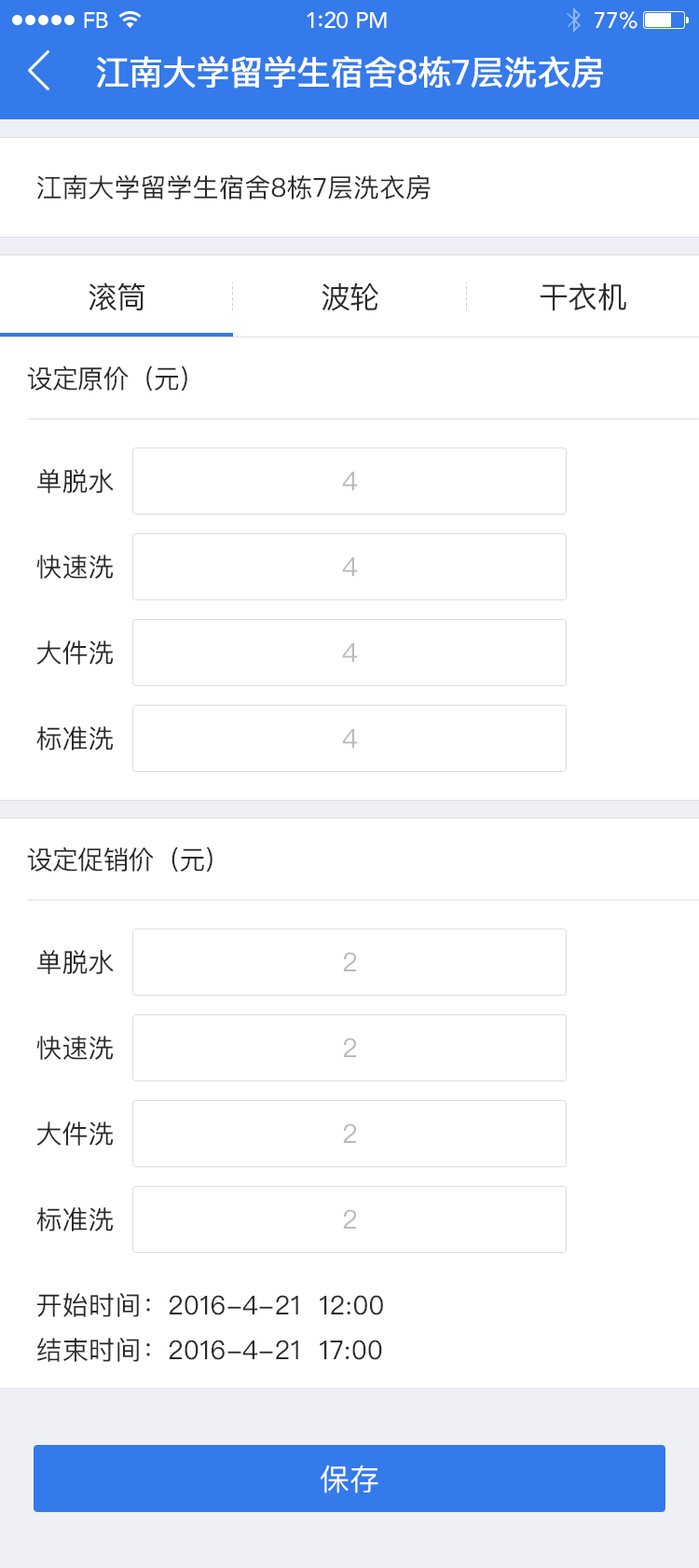
<style>
.page{position:relative;width:699px;height:1568px;background:#ffffff}
.page>*{position:absolute;margin:0}
.t1{font:22.4px "Avenir-Medium";letter-spacing:-0.025em;color:#ffffff}
.t2{font:22.4px "Avenir-Medium";color:#ffffff}
.t3{font:33.6px "PingFangSC-Regular";letter-spacing:-0.026em;color:#ffffff;font-weight:bold}
.t4{font:26.1px "PingFangSC-Regular";color:#29292d}
.t5{font:29.8px "PingFangSC-Regular";letter-spacing:-0.026em;color:#29292d}
.t6{font:26.1px "PingFangSC-Regular";letter-spacing:-0.026em;color:#29292d}
.t7{font:26.1px "PingFangSC-Regular";color:#b8bac0}
.t8{font:26.1px/44.7px "PingFangSC-Regular";letter-spacing:0.01em;color:#29292d}
.t9{font:29.8px "PingFangSC-Regular";color:#ffffff}
</style>
<div class="page">
<p class="t1" style="left:84px;top:12px;width:24px;height:16px">FB</p>
<p class="t2" style="left:307px;top:11px;width:80px;height:18px">1:20 PM</p>
<p class="t2" style="left:595px;top:11px;width:43px;height:18px">77%</p>
<p class="t3" style="left:96px;top:56px;width:507px;height:33px">江南大学留学生宿舍8栋7层洗衣房</p>
<p class="t4" style="left:36px;top:174px;width:395px;height:25px">江南大学留学生宿舍8栋7层洗衣房</p>
<p class="t5" style="left:89px;top:282px;width:55px;height:28px">滚筒</p>
<p class="t5" style="left:322px;top:282px;width:56px;height:29px">波轮</p>
<p class="t5" style="left:540px;top:282px;width:86px;height:29px">干衣机</p>
<p class="t6" style="left:27px;top:365px;width:160px;height:26px">设定原价（元）</p>
<p class="t4" style="left:37px;top:469px;width:77px;height:24px">单脱水</p>
<p class="t7" style="left:342px;top:472px;width:16px;height:18px">4</p>
<p class="t4" style="left:36px;top:555px;width:77px;height:24px">快速洗</p>
<p class="t7" style="left:342px;top:557px;width:16px;height:19px">4</p>
<p class="t4" style="left:36px;top:640px;width:77px;height:25px">大件洗</p>
<p class="t7" style="left:342px;top:643px;width:16px;height:19px">4</p>
<p class="t4" style="left:36px;top:725px;width:77px;height:25px">标准洗</p>
<p class="t7" style="left:342px;top:729px;width:16px;height:19px">4</p>
<p class="t6" style="left:27px;top:846px;width:186px;height:26px">设定促销价（元）</p>
<p class="t4" style="left:37px;top:950px;width:77px;height:24px">单脱水</p>
<p class="t7" style="left:343px;top:952px;width:13px;height:19px">2</p>
<p class="t4" style="left:36px;top:1036px;width:77px;height:24px">快速洗</p>
<p class="t7" style="left:343px;top:1038px;width:13px;height:19px">2</p>
<p class="t4" style="left:36px;top:1121px;width:77px;height:25px">大件洗</p>
<p class="t7" style="left:343px;top:1123px;width:13px;height:20px">2</p>
<p class="t4" style="left:36px;top:1206px;width:77px;height:25px">标准洗</p>
<p class="t7" style="left:343px;top:1209px;width:13px;height:20px">2</p>
<p class="t8" style="left:37px;top:1292px;width:346px;height:70px">开始时间：2016-4-21  12:00<br>结束时间：2016-4-21  17:00</p>
<p class="t9" style="left:321px;top:1465px;width:57px;height:28px">保存</p>
</div>
